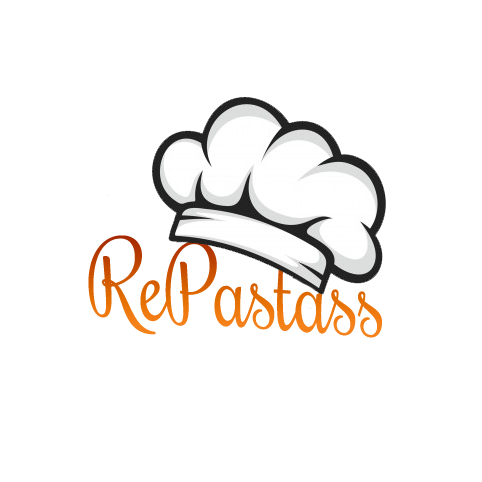
<style>
.page{position:relative;width:482px;height:482px;background:#ffffff}
.page>*{position:absolute;margin:0}
.t1{font:102.1px "Rochester-Regular";scale:0.81 1}
</style>
<div class="page">
<p class="t1" style="left:88px;top:235px;width:294px;height:103px;rotate:4deg">RePastass</p>
</div>
